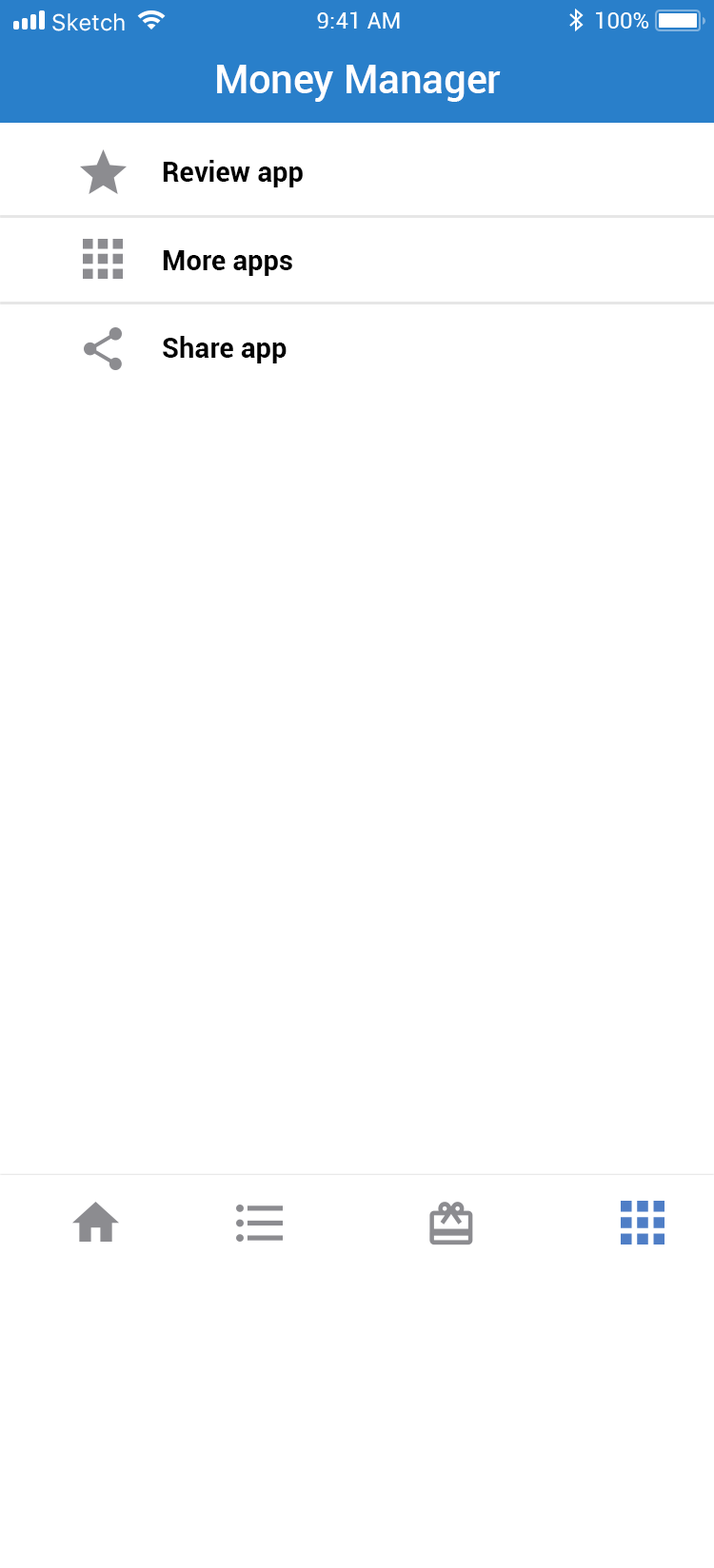
<style>
.page{position:relative;width:714px;height:1568px;background:#ffffff}
.page>*{position:absolute;margin:0}
.t1{font:39.6px "Roboto-Medium";color:#ffffff}
.t2{font:27.7px "Roboto-Bold";color:#000000}
</style>
<div class="page">
<p class="t1" style="left:217px;top:65px;width:283px;height:37px">Money Manager</p>
<p class="t2" style="left:163px;top:160px;width:140px;height:27px">Review app</p>
<p class="t2" style="left:163px;top:250px;width:129px;height:26px">More apps</p>
<p class="t2" style="left:163px;top:336px;width:123px;height:27px">Share app</p>
</div>
